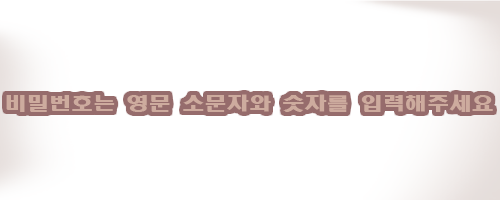
<style>
.page{position:relative;width:500px;height:200px;background:#ffffff}
.page>*{position:absolute;margin:0}
.t1{font:18px "HeadlineR-HM";color:#cdab9e;scale:1.24 1}
</style>
<div class="page">
<p class="t1" style="left:6px;top:94px;width:487px;height:18px">비밀번호는 영문 소문자와 숫자를 입력해주세요</p>
</div>
